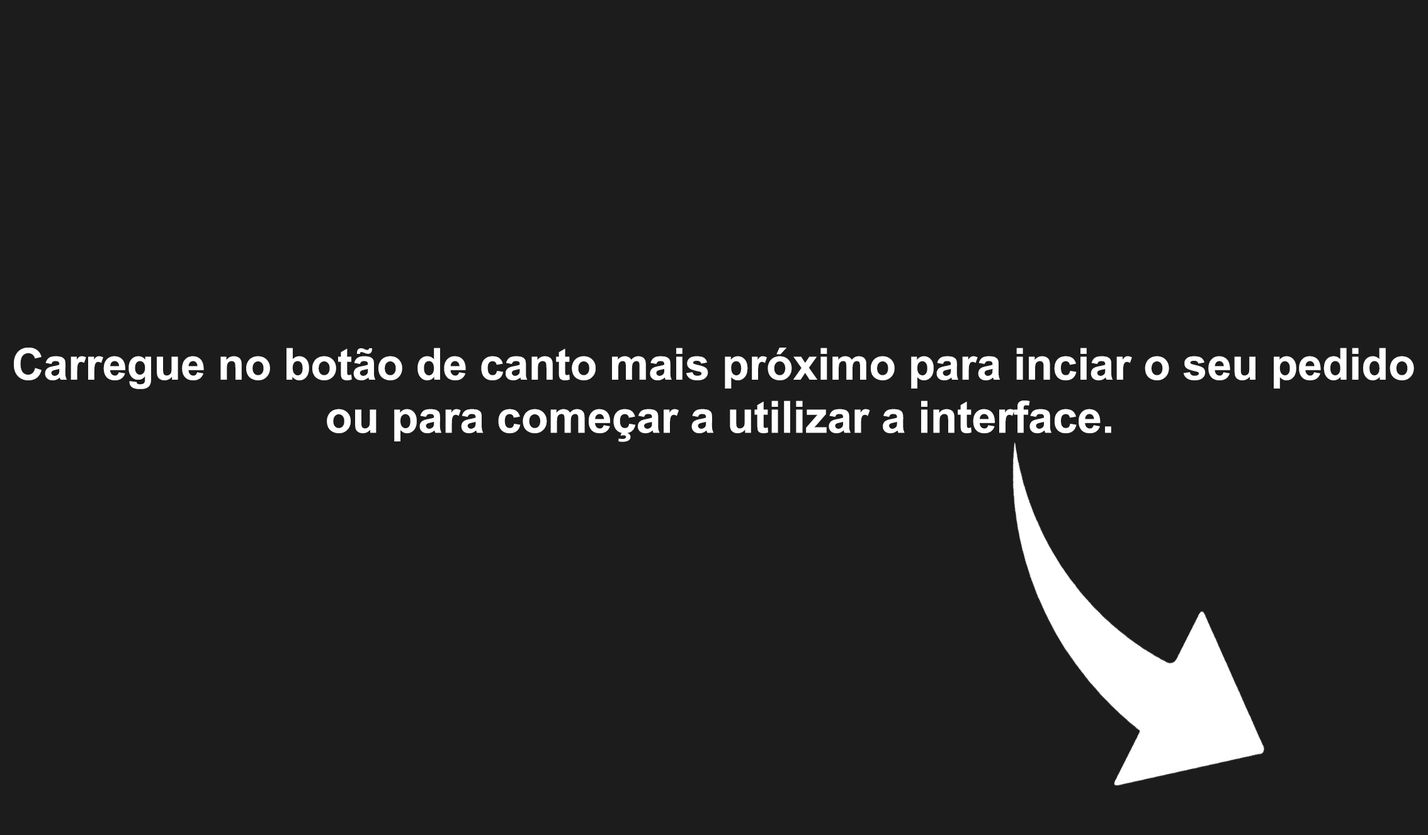
<style>
.page{position:relative;width:1428px;height:835px;background:#1c1c1c}
.page>*{position:absolute;margin:0}
.t1{font:44.1px "Arial-BoldMT";color:#ffffff}
</style>
<div class="page">
<p class="t1" style="left:14px;top:348px;width:1400px;height:94px;text-align:center">Carregue no botão de canto mais próximo para inciar o seu pedido <br>ou para começar a utilizar a interface.</p>
</div>
